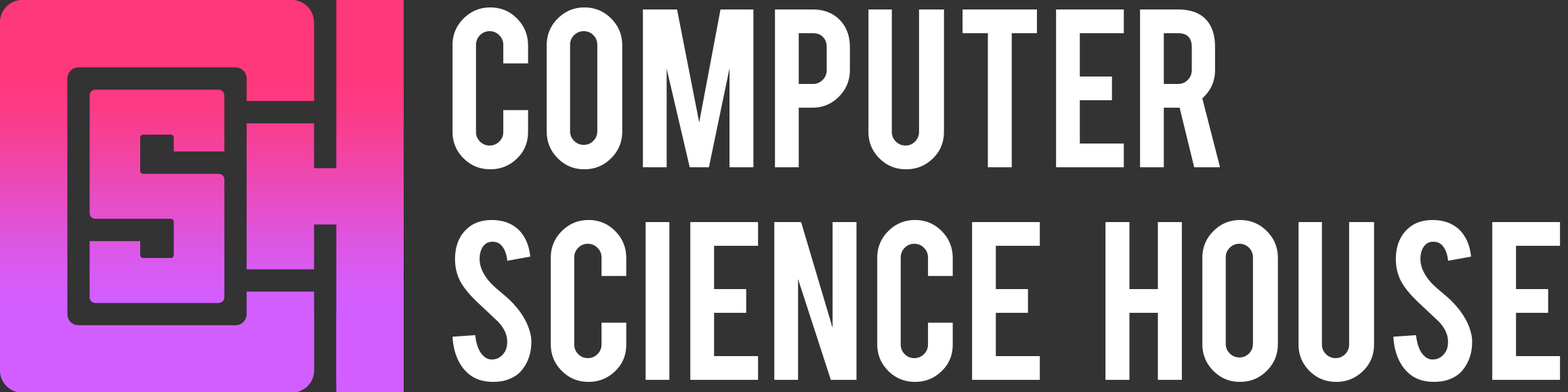
<style>
.page{position:relative;width:1568px;height:392px;background:#333333}
.page>*{position:absolute;margin:0}
.t1{font:177.1px "Bebas";color:#ffffff}
</style>
<div class="page">
<p class="t1" style="left:452px;top:7px;width:1109px;height:375px">Computer<br>Science   House</p>
</div>
